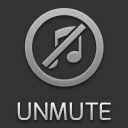
<style>
.page{position:relative;width:128px;height:128px;background:#333333}
.page>*{position:absolute;margin:0}
.t1{font:24px "Exo-Medium";text-transform:uppercase}
</style>
<div class="page">
<p class="t1" style="left:17px;top:102px;width:94px;height:18px">Unmute</p>
</div>
